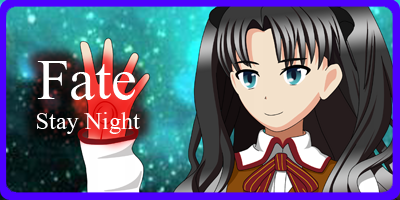
<style>
.page{position:relative;width:400px;height:200px}
.page>*{position:absolute;margin:0}
.t1{font:72px "Aparajita";color:#ffffff}
.t2{font:30px "Aparajita";color:#ffffff}
</style>
<div class="page">
<p class="t1" style="left:37px;top:61px;width:98px;height:39px">Fate</p>
<p class="t2" style="left:37px;top:112px;width:103px;height:22px">Stay Night</p>
</div>
